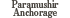
<style>
.page{position:relative;width:70px;height:18px;background:#ffffff}
.page>*{position:absolute;margin:0}
.t1{font:10px/8px "RyuminPro-ExBold";letter-spacing:-0.04em;color:#4c4843;scale:0.9 1}
</style>
<div class="page">
<p class="t1" style="left:11px;top:0px;width:48px;height:18px;text-align:center">Paramushir<br>Anchorage</p>
</div>
